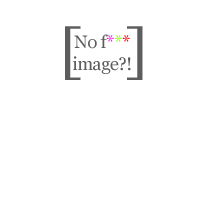
<style>
.page{position:relative;width:200px;height:200px;background:#ffffff}
.page>*{position:absolute;margin:0}
.t1{font:60px "Georgia";letter-spacing:-0.025em;color:#5d5d5d}
.t2{font:18px "Georgia";letter-spacing:-0.025em;color:#5d5d5d}
.t3{font:18px "Georgia";letter-spacing:-0.025em;color:#ff13ec}
.t4{font:18px "Georgia";letter-spacing:-0.025em;color:#8aff00}
.t5{font:18px "Georgia";letter-spacing:-0.025em;color:#ff0000}
</style>
<div class="page">
<p class="t1" style="left:65px;top:26px;width:16px;height:54px">[</p>
<p class="t1" style="left:127px;top:26px;width:16px;height:54px">]</p>
<p class="t2" style="left:72px;top:34px;width:59px;height:40px;text-align:center">No f<span class="t3">*</span><span class="t4">*</span><span class="t5">*<br></span>image?!</p>
</div>
